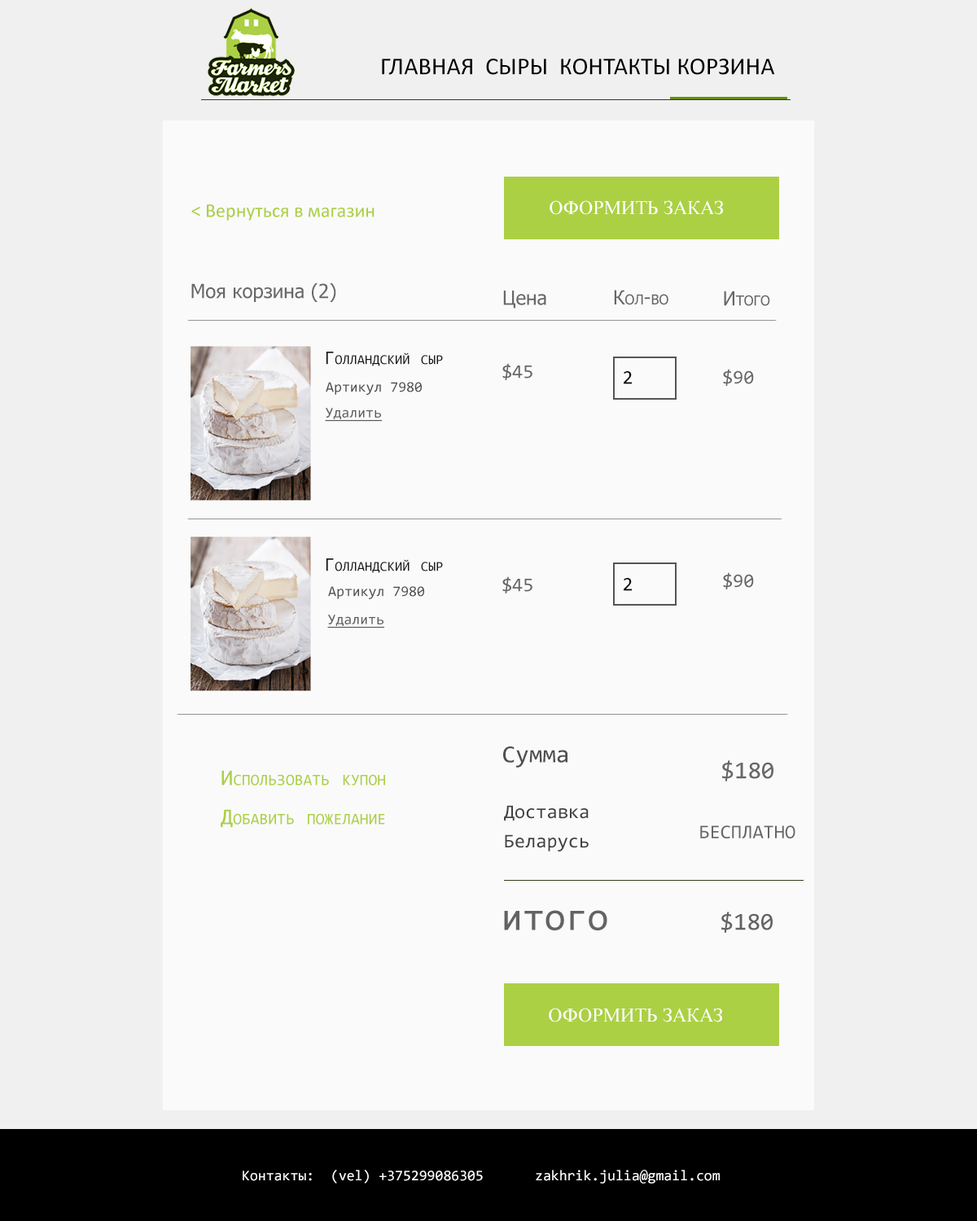
<style>
.page{position:relative;width:977px;height:1221px;background:#fafafa}
.page>*{position:absolute;margin:0}
.t1{font:24.4px "Calibri";color:#000000;text-transform:uppercase}
.t2{font:19.5px "Calibri";color:#abd044}
.t3{font:19.5px "TimesNewRomanPSMT";color:#ffffff;text-transform:uppercase}
.t4{font:19.5px "Tahoma";color:#676767}
.t5{font:19.5px "Tahoma";color:#676767;text-transform:uppercase}
.t6{font:19.5px "Tahoma";color:#676767;font-variant:small-caps}
.t7{font:19.5px "Consolas";color:#151515;font-variant:small-caps}
.t8{font:19.5px "Consolas";color:#676767}
.t9{font:19.5px "Consolas";color:#000000;text-transform:uppercase}
.t10{font:14.7px "Consolas";color:#4d4d4d}
.t11{font:14.7px "Consolas";color:#4d4d4d;text-transform:uppercase}
.t12{font:14.7px "Consolas";color:#5c5c5c;text-decoration:underline}
.t13{font:24.4px "Consolas";color:#4f4f4f}
.t14{font:24.4px "Consolas";color:#676767}
.t15{font:22.8px/39.1px "Consolas";color:#abd044;font-variant:small-caps}
.t16{font:19.5px/29.3px "Consolas";color:#414141}
.t17{font:39.1px "Consolas";color:#636363}
.t18{font:24.4px "Consolas";color:#636363}
.t19{font:14.7px "Consolas";color:#ffffff}
</style>
<div class="page">
<p class="t1" style="left:382px;top:59px;width:392px;height:16px">Главная  сыры  контакты корзина</p>
<p class="t2" style="left:191px;top:204px;width:183px;height:17px">&lt; Вернуться в магазин</p>
<p class="t3" style="left:549px;top:200px;width:174px;height:15px">оФОРМИТЬ ЗАКАЗ</p>
<p class="t4" style="left:191px;top:283px;width:145px;height:19px">Моя корзина (<span class="t5">2)</span></p>
<p class="t4" style="left:503px;top:291px;width:43px;height:17px">Цена</p>
<p class="t6" style="left:614px;top:290px;width:54px;height:15px">Кол-во</p>
<p class="t6" style="left:724px;top:291px;width:46px;height:15px">Итого</p>
<p class="t7" style="left:326px;top:352px;width:117px;height:14px">Голландский сыр</p>
<p class="t8" style="left:502px;top:363px;width:30px;height:17px">$45</p>
<p class="t9" style="left:623px;top:371px;width:9px;height:13px">2</p>
<p class="t8" style="left:723px;top:369px;width:31px;height:17px">$90</p>
<p class="t10" style="left:326px;top:382px;width:96px;height:13px">Артикул<span class="t11"> 7980</span></p>
<p class="t12" style="left:325px;top:408px;width:57px;height:14px">Удалить</p>
<p class="t7" style="left:326px;top:558px;width:117px;height:15px">Голландский сыр</p>
<p class="t8" style="left:502px;top:576px;width:30px;height:17px">$45</p>
<p class="t9" style="left:623px;top:578px;width:9px;height:13px">2</p>
<p class="t8" style="left:723px;top:572px;width:31px;height:17px">$90</p>
<p class="t10" style="left:328px;top:586px;width:96px;height:13px">Артикул<span class="t11"> 7980</span></p>
<p class="t12" style="left:327px;top:615px;width:57px;height:13px">Удалить</p>
<p class="t13" style="left:503px;top:746px;width:64px;height:22px">Сумма</p>
<p class="t14" style="left:722px;top:760px;width:51px;height:21px">$180</p>
<p class="t15" style="left:221px;top:770px;width:164px;height:58px">Использовать купон<br>Добавить пожелание</p>
<p class="t16" style="left:504px;top:805px;width:84px;height:46px">Доставка Беларусь</p>
<p class="t8" style="left:700px;top:825px;width:95px;height:13px">БЕСПЛАТНО</p>
<p class="t17" style="left:504px;top:910px;width:103px;height:20px">итого</p>
<p class="t18" style="left:721px;top:912px;width:51px;height:21px">$180</p>
<p class="t3" style="left:549px;top:1008px;width:173px;height:14px">оФОРМИТЬ ЗАКАЗ</p>
<p class="t19" style="left:243px;top:1170px;width:477px;height:13px">Контакты:  (vel) +375299086305  zakhrik.julia@gmail.com</p>
</div>
